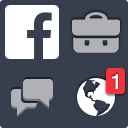
<style>
.page{position:relative;width:128px;height:128px;background:#373e4d}
.page>*{position:absolute;margin:0}
.t1{font:20px "HelveticaNeueLT-Medium";letter-spacing:-0.01em;color:#ffffff}
</style>
<div class="page">
<p class="t1" style="left:112px;top:74px;width:6px;height:15px">1</p>
</div>
